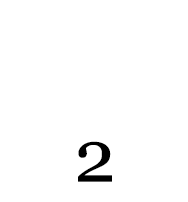
<style>
.page{position:relative;width:188px;height:202px;background:#ffffff}
.page>*{position:absolute;margin:0}
.t1{font:74px "Georgia";color:#000000}
</style>
<div class="page">
<p class="t1" style="left:78px;top:141px;width:34px;height:41px">2</p>
</div>
